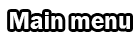
<style>
.page{position:relative;width:140px;height:40px;background:#ffffff}
.page>*{position:absolute;margin:0}
.t1{font:25px "FranklinGothic-Demi";color:#ffffff}
</style>
<div class="page">
<p class="t1" style="left:10px;top:12px;width:120px;height:17px">Main menu</p>
</div>
